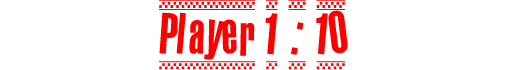
<style>
.page{position:relative;width:512px;height:70px;background:#ffffff}
.page>*{position:absolute;margin:0}
.t1{font:75px "1980Portable";color:#ff0000}
</style>
<div class="page">
<p class="t1" style="left:159px;top:0px;width:189px;height:72px">Player 1 : 10</p>
</div>
